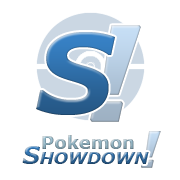
<style>
.page{position:relative;width:180px;height:180px;background:#ffffff}
.page>*{position:absolute;margin:0}
.t1{font:108px "Verdana-BoldItalic";font-variant:small-caps}
.t2{font:18px "Verdana-Bold"}
.t3{font:24px "Verdana-BoldItalic";font-variant:small-caps}
</style>
<div class="page">
<p class="t1" style="left:36px;top:32px;width:79px;height:83px">S</p>
<p class="t2" style="left:42px;top:135px;width:92px;height:14px">Pokemon</p>
<p class="t3" style="left:22px;top:146px;width:127px;height:18px">Showdown</p>
</div>
